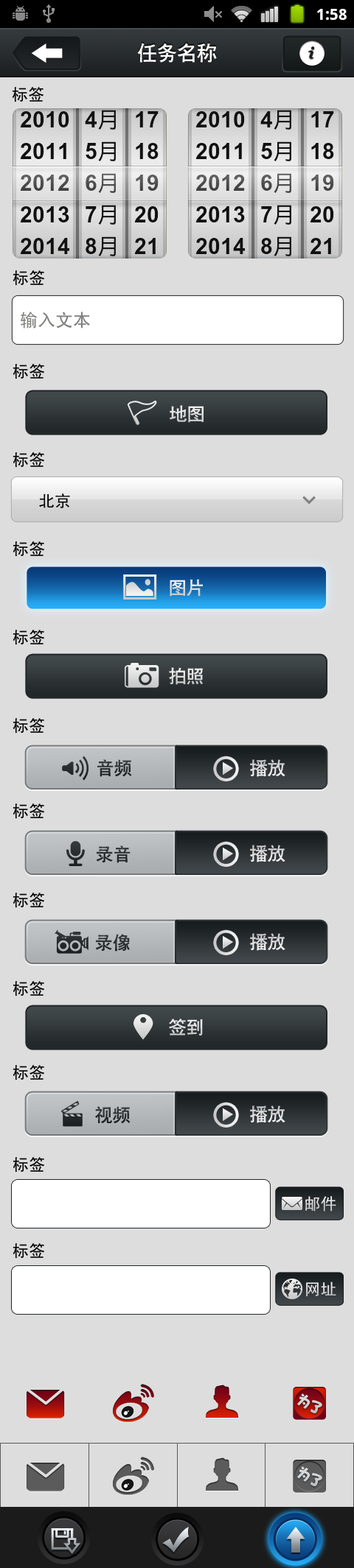
<style>
.page{position:relative;width:354px;height:1568px;background:#dddddd}
.page>*{position:absolute;margin:0}
.t1{font:19.9px "CTCuHeiSJ";color:#ffffff}
.t2{font:16.2px "SimHei";color:#000000}
.t3{font:17.7px "SimHei";color:#81817f}
.t4{font:17.7px "CTCuHeiSJ";color:#e0e0e0}
.t5{font:17.7px "CTCuHeiSJ";color:#dfdfdf}
.t6{font:17.7px "CTCuHeiSJ";color:#282d30}
.t7{font:17.7px "CTCuHeiSJ";color:#dedede}
.t8{font:17.7px "CTCuHeiSJ";color:#2b3033}
.t9{font:17.7px "CTCuHeiSJ";color:#272c2f}
.t10{font:16.2px "SimHei";color:#dedede}
.t11{font:16.2px "SimHei";color:#e2e2e2}
.t12{font:14.5px "DFHaiBaoW12";letter-spacing:-0.14em;color:#d1d1d1}
</style>
<div class="page">
<p class="t1" style="left:137px;top:43px;width:80px;height:20px">任务名称</p>
<p class="t2" style="left:12px;top:87px;width:31px;height:15px">标签</p>
<p class="t2" style="left:13px;top:270px;width:31px;height:16px">标签</p>
<p class="t3" style="left:21px;top:312px;width:69px;height:16px">输入文本</p>
<p class="t2" style="left:13px;top:364px;width:31px;height:15px">标签</p>
<p class="t4" style="left:169px;top:405px;width:34px;height:18px">地图</p>
<p class="t2" style="left:13px;top:452px;width:31px;height:16px">标签</p>
<p class="t2" style="left:39px;top:493px;width:31px;height:15px">北京</p>
<p class="t2" style="left:13px;top:541px;width:31px;height:16px">标签</p>
<p class="t5" style="left:169px;top:579px;width:34px;height:18px">图片</p>
<p class="t2" style="left:13px;top:630px;width:31px;height:15px">标签</p>
<p class="t4" style="left:169px;top:667px;width:34px;height:18px">拍照</p>
<p class="t2" style="left:13px;top:718px;width:31px;height:16px">标签</p>
<p class="t6" style="left:97px;top:759px;width:35px;height:18px">音频</p>
<p class="t7" style="left:250px;top:759px;width:35px;height:18px">播放</p>
<p class="t2" style="left:13px;top:804px;width:31px;height:15px">标签</p>
<p class="t8" style="left:96px;top:845px;width:34px;height:18px">录音</p>
<p class="t7" style="left:250px;top:845px;width:35px;height:17px">播放</p>
<p class="t2" style="left:13px;top:893px;width:31px;height:15px">标签</p>
<p class="t8" style="left:96px;top:934px;width:34px;height:18px">录像</p>
<p class="t7" style="left:250px;top:933px;width:35px;height:18px">播放</p>
<p class="t2" style="left:13px;top:981px;width:31px;height:15px">标签</p>
<p class="t5" style="left:169px;top:1019px;width:34px;height:17px">签到</p>
<p class="t2" style="left:13px;top:1065px;width:31px;height:15px">标签</p>
<p class="t9" style="left:95px;top:1106px;width:35px;height:18px">视频</p>
<p class="t7" style="left:250px;top:1105px;width:35px;height:18px">播放</p>
<p class="t2" style="left:13px;top:1157px;width:31px;height:16px">标签</p>
<p class="t10" style="left:305px;top:1196px;width:31px;height:16px">邮件</p>
<p class="t2" style="left:13px;top:1243px;width:31px;height:16px">标签</p>
<p class="t11" style="left:306px;top:1282px;width:30px;height:15px">网址</p>
<p class="t12" style="left:296px;top:1393px;width:26px;height:20px;rotate:28deg">为了</p>
<p class="t12" style="left:296px;top:1466px;width:26px;height:20px;rotate:28deg">为了</p>
</div>
